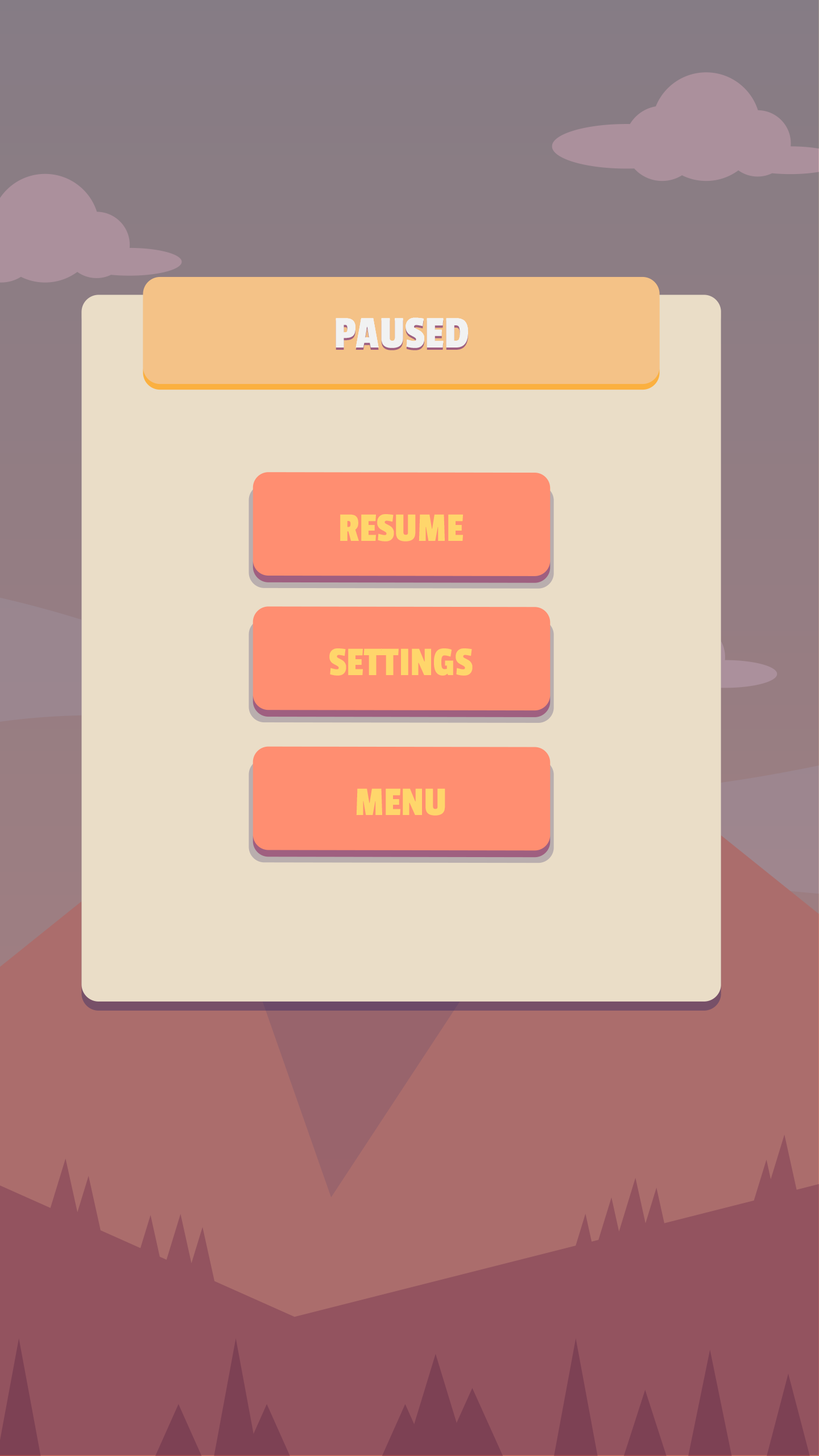
<style>
.page{position:relative;width:819px;height:1456px;background:#eaddc7}
.page>*{position:absolute;margin:0}
.t1{font:47.2px "PassionOne-Regular";color:#ffffff}
.t2{font:47.2px "PassionOne-Regular";color:#f1f2f2}
.t3{font:42.3px "PassionOne-Regular";color:#ffd66b}
</style>
<div class="page">
<p class="t1" style="left:336px;top:317px;width:132px;height:31px">PAUSED</p>
<p class="t2" style="left:336px;top:317px;width:132px;height:31px">PAUSED</p>
<p class="t2" style="left:336px;top:320px;width:132px;height:30px">PAUSED</p>
<p class="t3" style="left:340px;top:514px;width:123px;height:27px">RESUME</p>
<p class="t3" style="left:329px;top:648px;width:144px;height:28px">SETTINGS</p>
<p class="t3" style="left:356px;top:788px;width:89px;height:28px">MENU</p>
</div>
